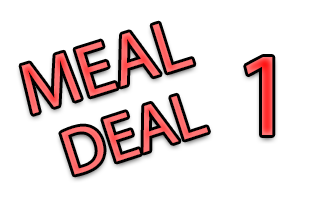
<style>
.page{position:relative;width:312px;height:200px;background:#ffffff}
.page>*{position:absolute;margin:0}
.t1{font:72.8px "MyriadPro-Regular";color:#ff6a6a}
.t2{font:119.5px "MyriadPro-Regular"}
</style>
<div class="page">
<p class="t1" style="left:21px;top:23px;width:173px;height:91px;rotate:-17deg">MEAL</p>
<p class="t2" style="left:246px;top:57px;width:27px;height:78px">1</p>
</div>
